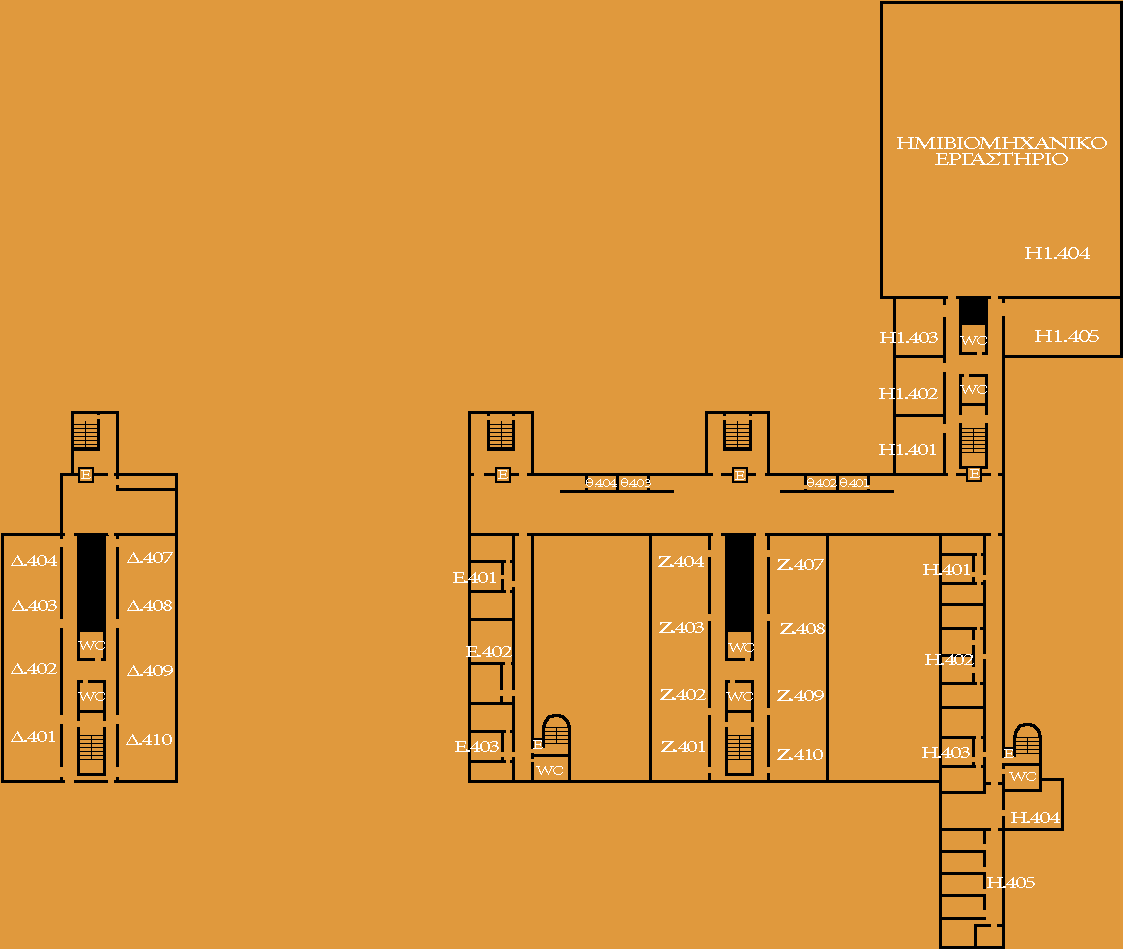
<style>
.page{position:relative;width:1123px;height:949px;background:#e0993d}
.page>*{position:absolute;margin:0}
.t1{font:18.4px "MinionPro-Regular";letter-spacing:-0.08em;color:#ffffff;scale:1.45 1}
.t2{font:16.6px "MinionPro-Regular";letter-spacing:-0.08em;color:#ffffff;scale:1.45 1}
.t3{font:12.9px "MinionPro-Regular";letter-spacing:-0.08em;color:#ffffff;scale:1.45 1}
</style>
<div class="page">
<p class="t1" style="left:897px;top:137px;width:210px;height:28px;text-align:center">ΗΜΙΒΙΟΜΗΧΑΝΙΚΟ<br>ΕΡΓΑΣΤΗΡΙΟ</p>
<p class="t1" style="left:1025px;top:247px;width:65px;height:12px">Η1.404</p>
<p class="t2" style="left:880px;top:332px;width:58px;height:11px">Η1.403</p>
<p class="t3" style="left:960px;top:336px;width:27px;height:9px">WC</p>
<p class="t1" style="left:1035px;top:330px;width:64px;height:12px">Η1.405</p>
<p class="t2" style="left:879px;top:388px;width:59px;height:11px">Η1.402</p>
<p class="t3" style="left:960px;top:385px;width:27px;height:9px">WC</p>
<p class="t2" style="left:879px;top:444px;width:57px;height:11px">Η1.401</p>
<p class="t3" style="left:81px;top:470px;width:10px;height:9px">E</p>
<p class="t3" style="left:498px;top:470px;width:10px;height:9px">E</p>
<p class="t3" style="left:735px;top:471px;width:10px;height:9px">E</p>
<p class="t3" style="left:970px;top:469px;width:10px;height:9px">E</p>
<p class="t3" style="left:586px;top:478px;width:31px;height:9px">θ.404</p>
<p class="t3" style="left:621px;top:478px;width:30px;height:9px">θ.403</p>
<p class="t3" style="left:807px;top:478px;width:30px;height:9px">θ.402</p>
<p class="t3" style="left:840px;top:478px;width:29px;height:9px">θ.401</p>
<p class="t2" style="left:11px;top:555px;width:46px;height:11px">Δ.404</p>
<p class="t2" style="left:127px;top:552px;width:46px;height:11px">Δ.407</p>
<p class="t2" style="left:658px;top:556px;width:46px;height:11px">Ζ.404</p>
<p class="t2" style="left:777px;top:559px;width:47px;height:11px">Ζ.407</p>
<p class="t2" style="left:923px;top:564px;width:47px;height:11px">Η.401</p>
<p class="t2" style="left:453px;top:572px;width:43px;height:11px">Ε.401</p>
<p class="t2" style="left:12px;top:600px;width:45px;height:11px">Δ.403</p>
<p class="t2" style="left:127px;top:600px;width:45px;height:11px">Δ.408</p>
<p class="t2" style="left:659px;top:622px;width:45px;height:11px">Ζ.403</p>
<p class="t2" style="left:780px;top:623px;width:45px;height:11px">Ζ.408</p>
<p class="t3" style="left:78px;top:641px;width:27px;height:9px">WC</p>
<p class="t2" style="left:466px;top:646px;width:46px;height:11px">Ε.402</p>
<p class="t3" style="left:728px;top:643px;width:26px;height:9px">WC</p>
<p class="t2" style="left:925px;top:654px;width:49px;height:11px">Η.402</p>
<p class="t2" style="left:11px;top:663px;width:46px;height:11px">Δ.402</p>
<p class="t2" style="left:127px;top:665px;width:46px;height:11px">Δ.409</p>
<p class="t2" style="left:660px;top:689px;width:46px;height:11px">Ζ.402</p>
<p class="t3" style="left:78px;top:692px;width:27px;height:9px">WC</p>
<p class="t3" style="left:726px;top:692px;width:27px;height:9px">WC</p>
<p class="t2" style="left:777px;top:690px;width:47px;height:11px">Ζ.409</p>
<p class="t2" style="left:11px;top:731px;width:44px;height:11px">Δ.401</p>
<p class="t2" style="left:126px;top:734px;width:46px;height:11px">Δ.410</p>
<p class="t2" style="left:455px;top:741px;width:44px;height:11px">Ε.403</p>
<p class="t3" style="left:533px;top:740px;width:10px;height:9px">E</p>
<p class="t2" style="left:661px;top:741px;width:44px;height:11px">Ζ.401</p>
<p class="t2" style="left:777px;top:749px;width:46px;height:11px">Ζ.410</p>
<p class="t2" style="left:922px;top:747px;width:48px;height:11px">Η.403</p>
<p class="t3" style="left:1004px;top:749px;width:10px;height:9px">E</p>
<p class="t3" style="left:536px;top:766px;width:27px;height:9px">WC</p>
<p class="t3" style="left:1009px;top:772px;width:27px;height:9px">WC</p>
<p class="t2" style="left:1011px;top:812px;width:49px;height:11px">Η.404</p>
<p class="t2" style="left:987px;top:877px;width:48px;height:11px">Η.405</p>
</div>
